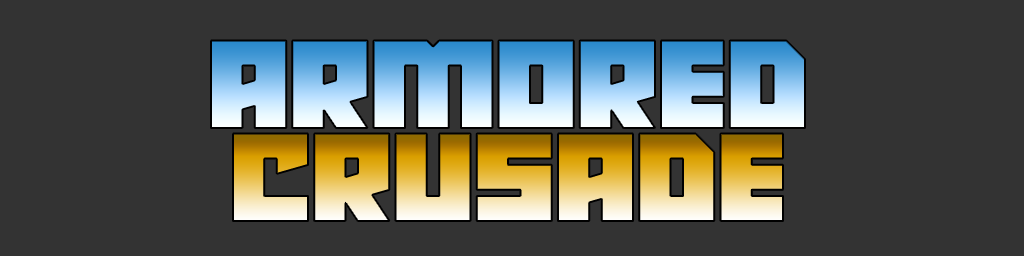
<style>
.page{position:relative;width:1024px;height:256px;background:#333333}
.page>*{position:absolute;margin:0}
.t1{font:128px/93px "RobotRadicals"}
</style>
<div class="page">
<p class="t1" style="left:211px;top:40px;width:594px;height:181px;text-align:center">Armored<br>Crusade</p>
</div>
